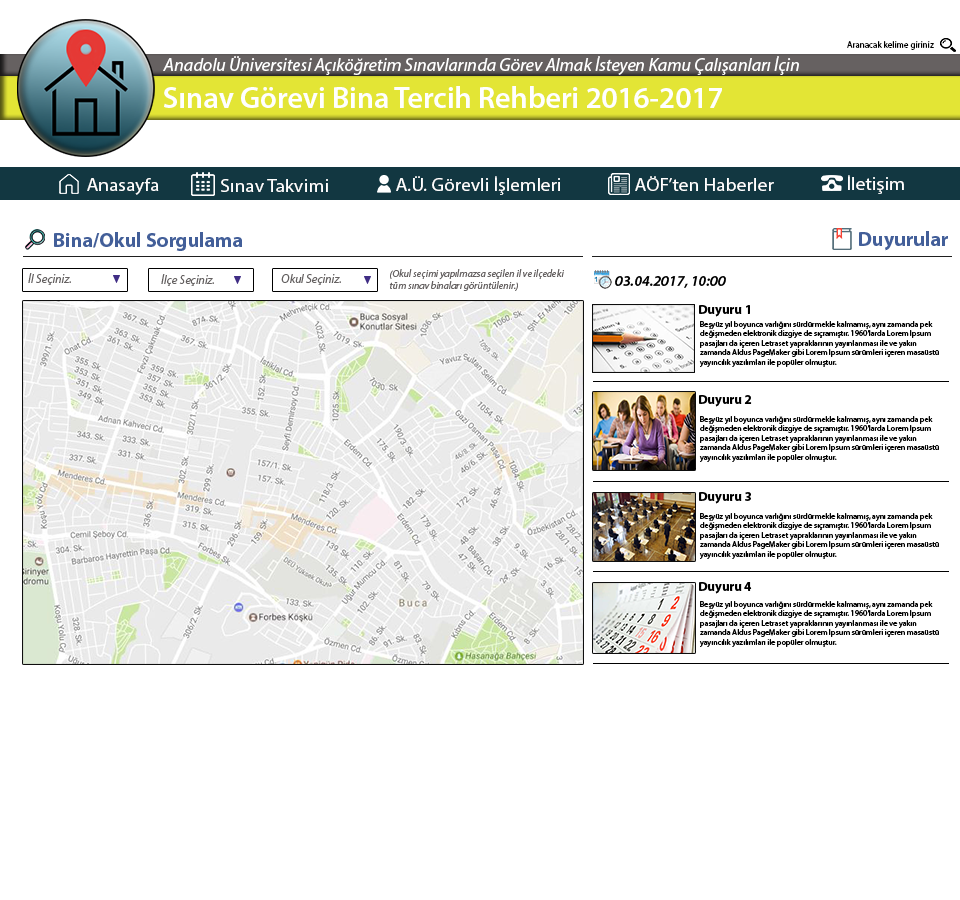
<style>
.page{position:relative;width:960px;height:900px;background:#ffffff}
.page>*{position:absolute;margin:0}
.t1{font:9px "MyriadPro-Regular";color:#000000}
.t2{font:18px "MyriadPro-It";color:#ffffff}
.t3{font:30px "MyriadPro-Semibold";color:#ffffff}
.t4{font:18px "MyriadPro-Regular";color:#ffffff;scale:1.08 1}
.t5{font:20px "MyriadPro-Bold";color:#435f99}
.t6{font:10px "MyriadPro-It";color:#666262}
.t7{font:12px "MyriadPro-It";color:#666262}
.t8{font:15px "MyriadPro-SemiboldIt";color:#000000}
.t9{font:13px "MyriadPro-Bold";color:#000000}
.t10{font:8px "MyriadPro-Regular";color:#000000}
</style>
<div class="page">
<p class="t1" style="left:847px;top:41px;width:87px;height:9px">Aranacak kelime giriniz</p>
<p class="t2" style="left:163px;top:56px;width:636px;height:19px">Anadolu Üniversitesi Açıköğretim Sınavlarında Görev Almak İsteyen Kamu Çalışanları İçin</p>
<p class="t3" style="left:164px;top:86px;width:558px;height:22px">Sınav Görevi Bina Tercih Rehberi 2016-2017</p>
<p class="t4" style="left:87px;top:178px;width:72px;height:17px">Anasayfa</p>
<p class="t4" style="left:221px;top:179px;width:107px;height:13px">Sınav Takvimi</p>
<p class="t4" style="left:396px;top:176px;width:164px;height:19px">A.Ü. Görevli İşlemleri</p>
<p class="t4" style="left:635px;top:176px;width:139px;height:15px">AÖF’ten Haberler</p>
<p class="t4" style="left:848px;top:175px;width:56px;height:19px">İletişim</p>
<p class="t5" style="left:54px;top:232px;width:188px;height:19px">Bina/Okul Sorgulama</p>
<p class="t5" style="left:859px;top:231px;width:89px;height:20px">Duyurular</p>
<p class="t6" style="left:389px;top:269px;width:175px;height:22px">(Okul seçimi yapılmazsa seçilen il ve ilçedeki <br>tüm sınav binaları görüntülenir.)</p>
<p class="t7" style="left:28px;top:273px;width:43px;height:12px">İl Seçiniz.</p>
<p class="t7" style="left:161px;top:274px;width:53px;height:12px">İlçe Seçiniz.</p>
<p class="t7" style="left:281px;top:274px;width:60px;height:11px">Okul Seçiniz.</p>
<p class="t8" style="left:615px;top:276px;width:111px;height:12px">03.04.2017, 10:00</p>
<p class="t9" style="left:699px;top:305px;width:51px;height:12px">Duyuru 1</p>
<p class="t10" style="left:699px;top:321px;width:240px;height:46px">Beşyüz yıl boyunca varlığını sürdürmekle kalmamış, aynı zamanda pek değişmeden elektronik dizgiye de sıçramıştır. 1960'larda Lorem Ipsum pasajları da içeren Letraset yapraklarının yayınlanması ile ve yakın zamanda Aldus PageMaker gibi Lorem Ipsum sürümleri içeren masaüstü yayıncılık yazılımları ile popüler olmuştur.</p>
<p class="t9" style="left:699px;top:395px;width:53px;height:12px">Duyuru 2</p>
<p class="t10" style="left:699px;top:416px;width:240px;height:46px">Beşyüz yıl boyunca varlığını sürdürmekle kalmamış, aynı zamanda pek değişmeden elektronik dizgiye de sıçramıştır. 1960'larda Lorem Ipsum pasajları da içeren Letraset yapraklarının yayınlanması ile ve yakın zamanda Aldus PageMaker gibi Lorem Ipsum sürümleri içeren masaüstü yayıncılık yazılımları ile popüler olmuştur.</p>
<p class="t9" style="left:699px;top:492px;width:52px;height:12px">Duyuru 3</p>
<p class="t10" style="left:699px;top:513px;width:240px;height:46px">Beşyüz yıl boyunca varlığını sürdürmekle kalmamış, aynı zamanda pek değişmeden elektronik dizgiye de sıçramıştır. 1960'larda Lorem Ipsum pasajları da içeren Letraset yapraklarının yayınlanması ile ve yakın zamanda Aldus PageMaker gibi Lorem Ipsum sürümleri içeren masaüstü yayıncılık yazılımları ile popüler olmuştur.</p>
<p class="t9" style="left:699px;top:582px;width:53px;height:12px">Duyuru 4</p>
<p class="t10" style="left:699px;top:601px;width:240px;height:46px">Beşyüz yıl boyunca varlığını sürdürmekle kalmamış, aynı zamanda pek değişmeden elektronik dizgiye de sıçramıştır. 1960'larda Lorem Ipsum pasajları da içeren Letraset yapraklarının yayınlanması ile ve yakın zamanda Aldus PageMaker gibi Lorem Ipsum sürümleri içeren masaüstü yayıncılık yazılımları ile popüler olmuştur.</p>
</div>
